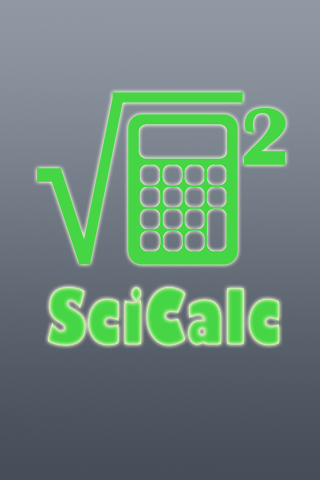
<style>
.page{position:relative;width:320px;height:480px}
.page>*{position:absolute;margin:0}
.t1{font:75.1px "GillSans-UltraBold";color:#46d645;scale:0.72 1}
</style>
<div class="page">
<p class="t1" style="left:47px;top:287px;width:232px;height:59px">SciCalc</p>
</div>
